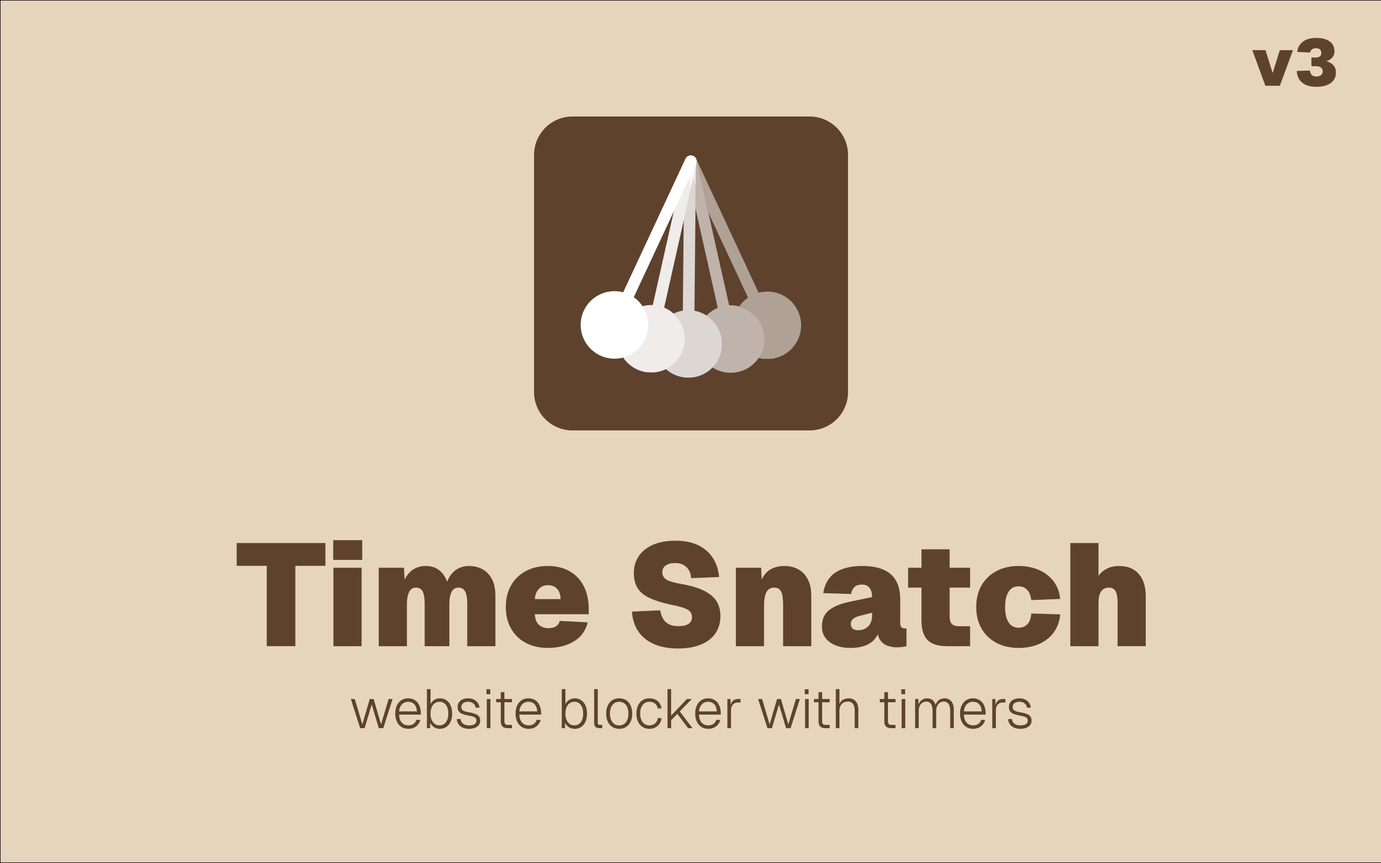
<style>
.page{position:relative;width:1381px;height:863px;background:#e6d5bc}
.page>*{position:absolute;margin:0}
.t1{font:65.9px "Geist-Black";color:#5f422e}
.t2{font:145.3px "Geist-Black";color:#5f422e}
.t3{font:55px "Geist-Light";color:#5f422e}
</style>
<div class="page">
<p class="t1" style="left:1252px;top:38px;width:84px;height:49px">v3</p>
<p class="t2" style="left:236px;top:540px;width:910px;height:109px">Time Snatch</p>
<p class="t3" style="left:351px;top:689px;width:681px;height:40px">website blocker with timers</p>
</div>
